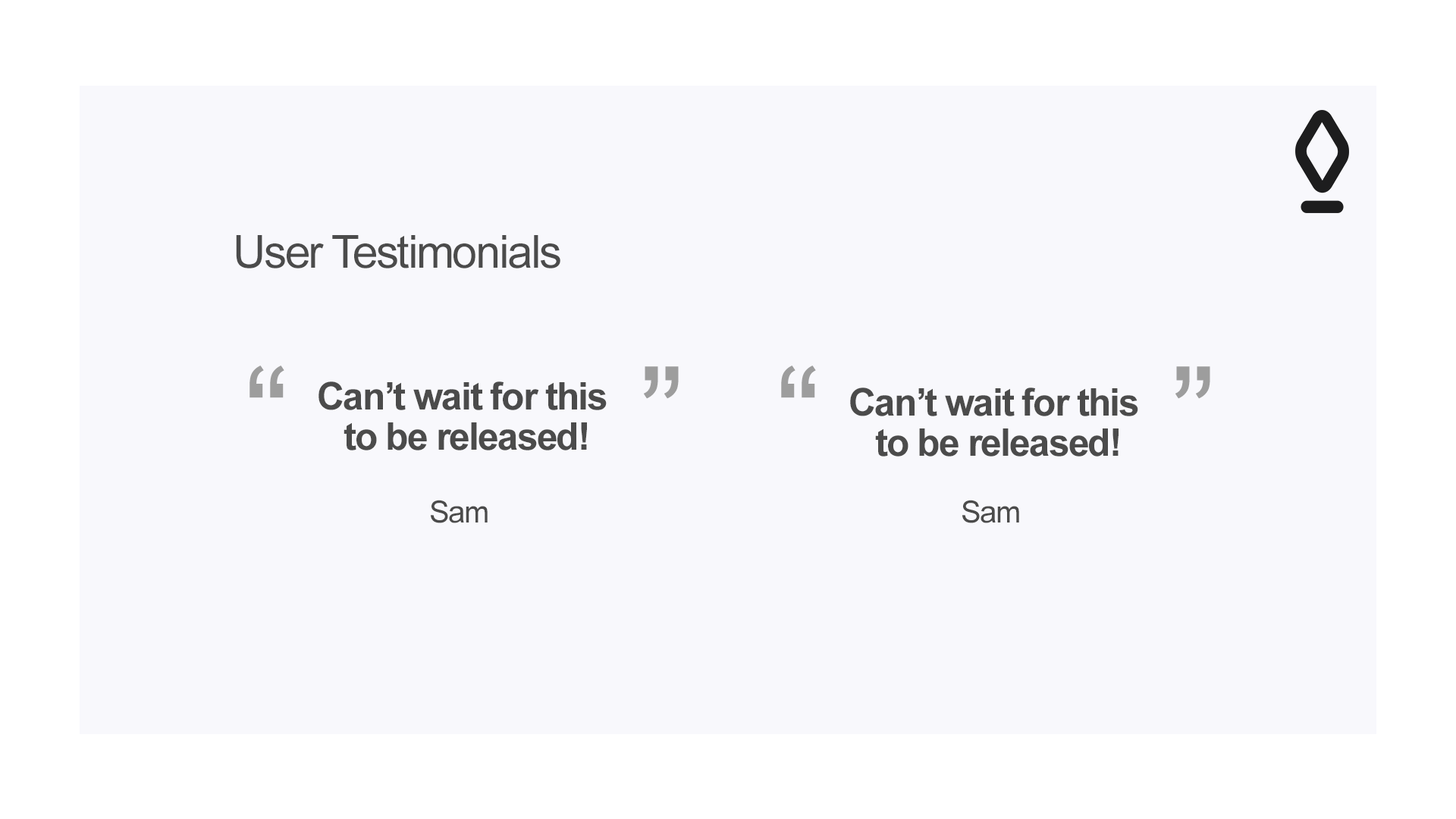
<style>
.page{position:relative;width:1456px;height:819px;background:#f8f8fc}
.page>*{position:absolute;margin:0}
.t1{font:45.5px "ArialMT";letter-spacing:-0.04em;color:#4b4b4b}
.t2{font:136px "ArialMT";letter-spacing:-0.04em;color:#9d9d9d}
.t3{font:38.1px/40.4px "Arial-BoldMT";letter-spacing:-0.04em;color:#4b4b4b}
.t4{font:30.3px "ArialMT";letter-spacing:-0.04em;color:#4b4b4b}
</style>
<div class="page">
<p class="t1" style="left:236px;top:235px;width:324px;height:33px">User Testimonials</p>
<p class="t2" style="left:781px;top:366px;width:429px;height:33px">“           ”</p>
<p class="t3" style="left:318px;top:381px;width:289px;height:69px;text-align:center">Can’t wait for this<br> to be released!</p>
<p class="t3" style="left:850px;top:388px;width:288px;height:69px;text-align:center">Can’t wait for this<br> to be released!</p>
<p class="t4" style="left:431px;top:500px;width:57px;height:23px">Sam</p>
<p class="t4" style="left:962px;top:500px;width:57px;height:23px">Sam</p>
</div>
